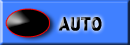
<style>
.page{position:relative;width:130px;height:45px;background:#4080ff}
.page>*{position:absolute;margin:0}
.t1{font:18px "GothicXB-HM"}
</style>
<div class="page">
<p class="t1" style="left:58px;top:17px;width:44px;height:14px">AUTO</p>
</div>
